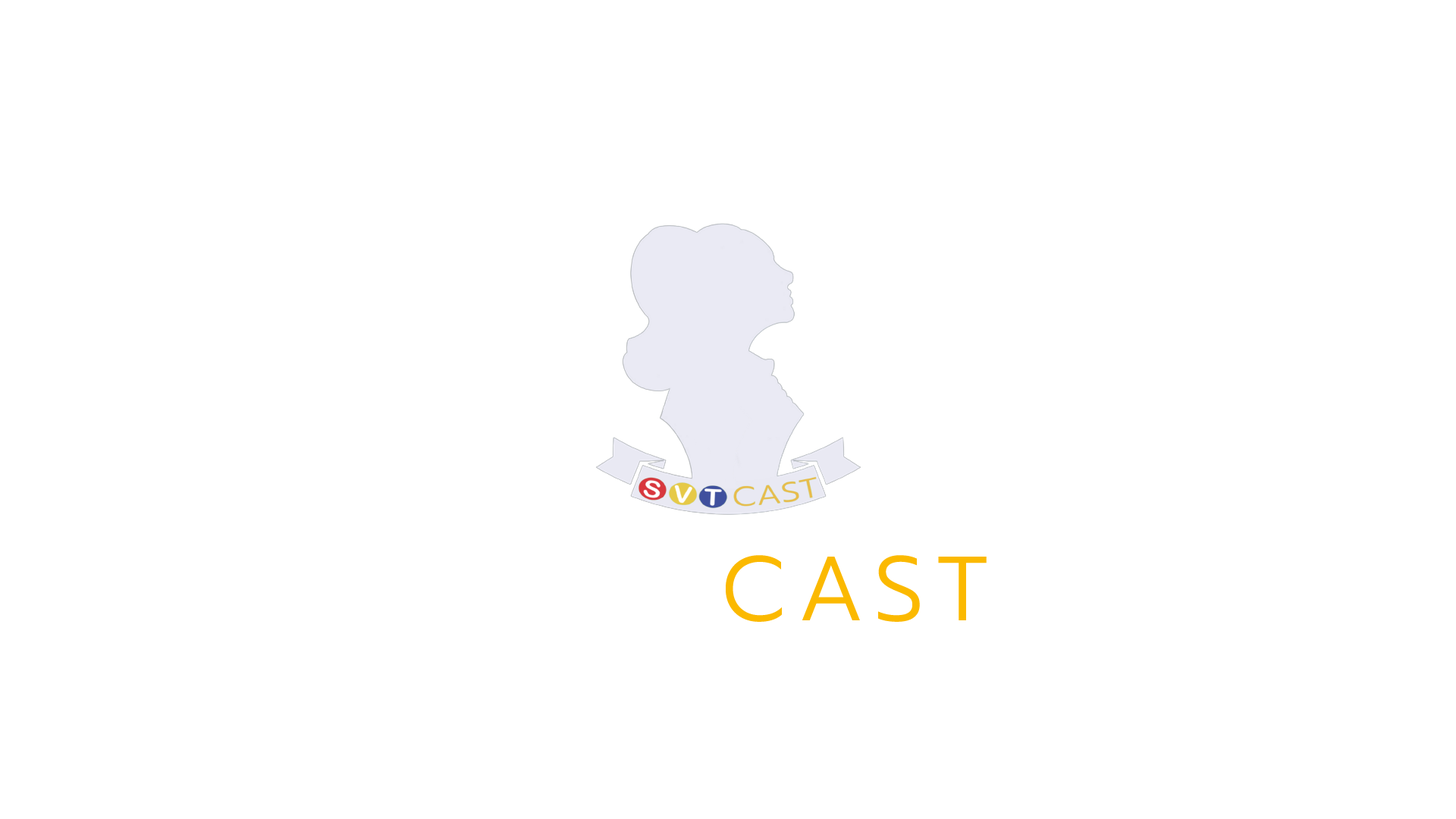
<style>
.page{position:relative;width:1456px;height:819px;background:#ffffff}
.page>*{position:absolute;margin:0}
.t1{font:91px "Prompt-Light";letter-spacing:0.15em;color:#fbb900;text-transform:uppercase}
.t2{font:91px "Prompt-Light";letter-spacing:0.15em;color:#ffffff;text-transform:uppercase}
</style>
<div class="page">
<p class="t1" style="left:470px;top:555px;width:517px;height:67px"><span class="t2">SVT </span>CAST</p>
</div>
